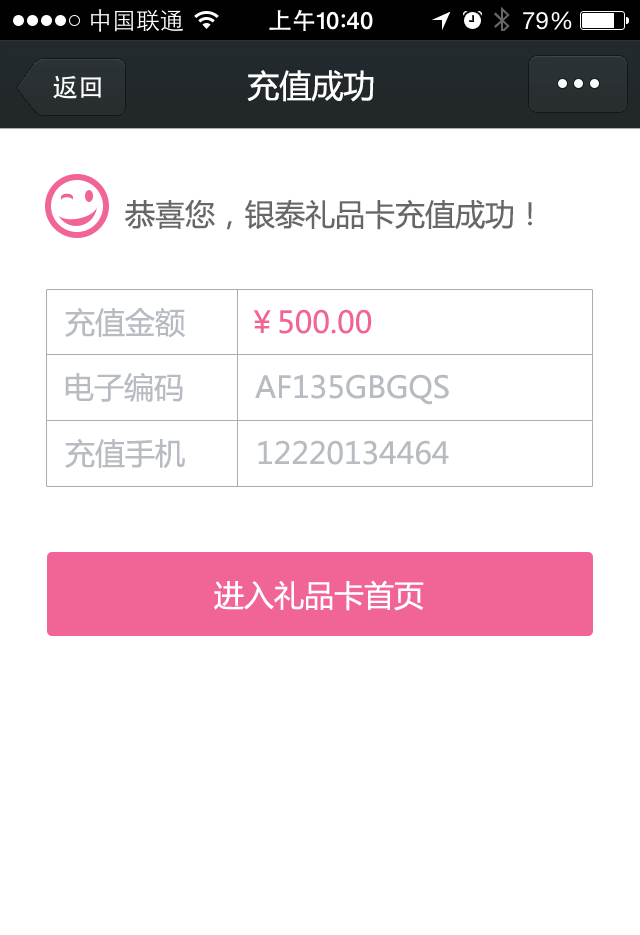
<style>
.page{position:relative;width:640px;height:935px;background:#ffffff}
.page>*{position:absolute;margin:0}
.t1{font:32px "MicrosoftYaHei";color:#ffffff}
.t2{font:30px "MicrosoftYaHei";color:#676767}
.t3{font:30px "MicrosoftYaHei";color:#f16498}
.t4{font:30px "MicrosoftYaHei";color:#b7bbc2}
.t5{font:30px "MicrosoftYaHei";color:#ffffff}
</style>
<div class="page">
<p class="t1" style="left:247px;top:70px;width:127px;height:32px">充值成功</p>
<p class="t2" style="left:125px;top:199px;width:407px;height:31px">恭喜您，银泰礼品卡充值成功！</p>
<p class="t3" style="left:65px;top:307px;width:307px;height:31px"><span class="t4">充值金额       </span>￥500.00</p>
<p class="t4" style="left:65px;top:372px;width:384px;height:33px">电子编码        AF135GBGQS</p>
<p class="t4" style="left:65px;top:438px;width:384px;height:31px">充值手机        12220134464</p>
<p class="t5" style="left:214px;top:580px;width:210px;height:31px">进入礼品卡首页</p>
</div>
